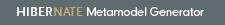
<style>
.page{position:relative;width:225px;height:25px;background:#606b6d}
.page>*{position:absolute;margin:0}
.t1{font:13px "Neuzeit-Normal";letter-spacing:-0.02em;color:#ffffff}
</style>
<div class="page">
<p class="t1" style="left:87px;top:7px;width:117px;height:9px">Metamodel Generator</p>
</div>
